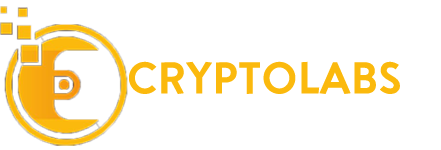
<style>
.page{position:relative;width:441px;height:150px;background:#ffffff}
.page>*{position:absolute;margin:0}
.t1{font:45.8px "AronGrotesque-Bold";letter-spacing:-0.01em;color:#fbb90d}
.t2{font:45.8px "AronGrotesque-Bold";letter-spacing:-0.01em;color:#ffffff}
</style>
<div class="page">
<p class="t1" style="left:129px;top:58px;width:311px;height:36px">CRYPTOLABS<span class="t2">fx</span></p>
</div>
